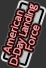
<style>
.page{position:relative;width:46px;height:68px;background:#333333}
.page>*{position:absolute;margin:0}
.t1{font:9px/10px "UDShinGoPro-Light";letter-spacing:-0.05em;color:#f1a1a1;font-weight:bold}
.t2{font:9px/10px "UDShinGoPro-Light";color:#f1a1a1;font-weight:bold}
</style>
<div class="page">
<p class="t1" style="left:3px;top:3px;width:37px;height:63px;text-align:center;rotate:-72deg"><span class="t2">American<br></span>D-Day Landing<br><span class="t2">Force</span></p>
</div>
